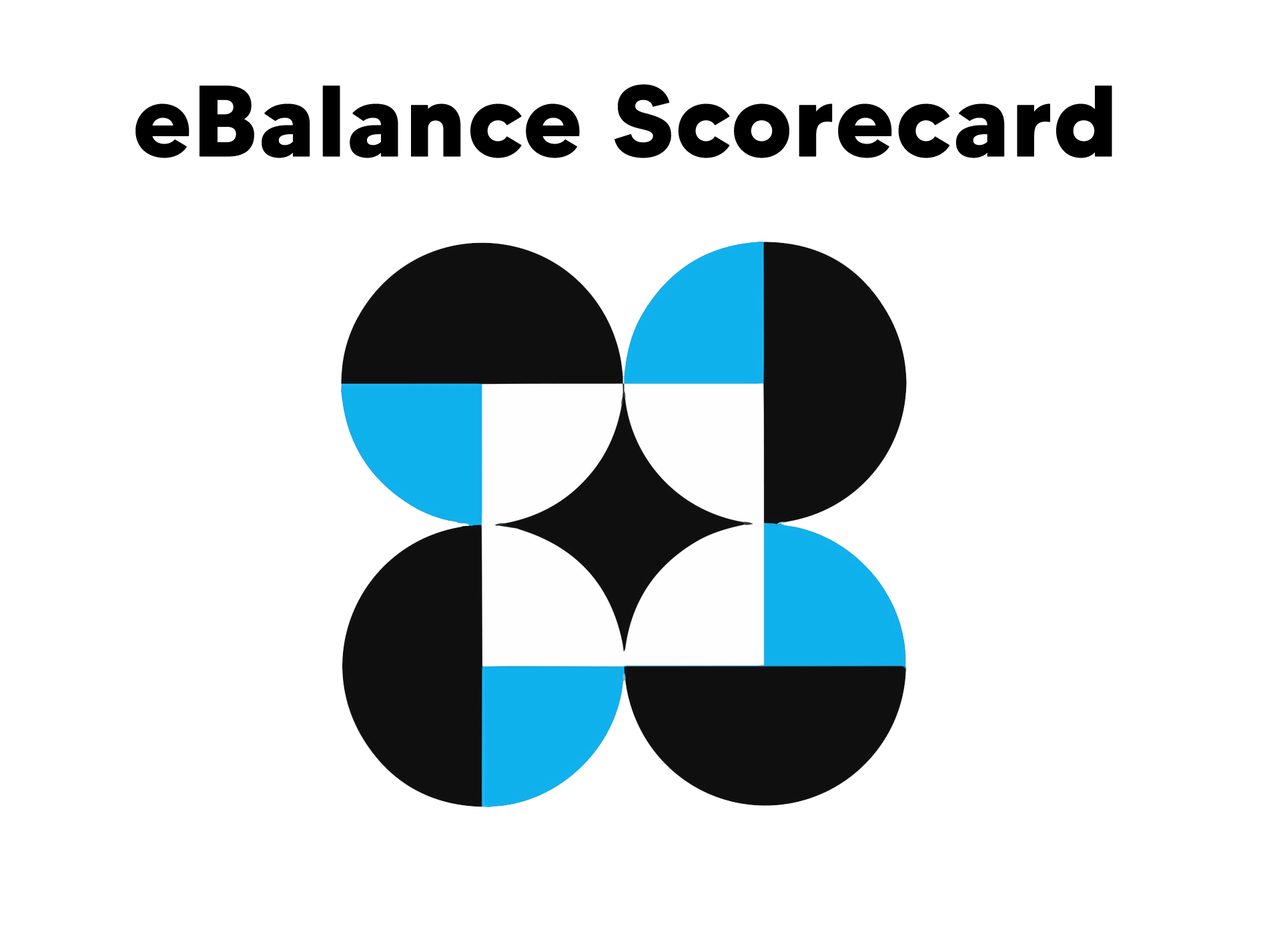
<style>
.page{position:relative;width:1261px;height:946px;background:#ffffff}
.page>*{position:absolute;margin:0}
.t1{font:100.1px "MADETOMMY-Bold";color:#000000;font-weight:bold}
</style>
<div class="page">
<p class="t1" style="left:135px;top:84px;width:977px;height:74px">eBalance Scorecard</p>
</div>
